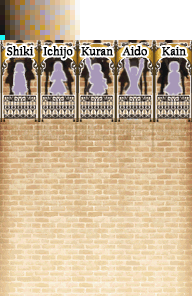
<style>
.page{position:relative;width:192px;height:296px}
.page>*{position:absolute;margin:0}
.t1{font:12px "CalifornianFB-Reg";color:#000000;font-weight:bold}
.t2{font:12px "CalifornianFB-Reg";letter-spacing:-0.005em;color:#000000;font-weight:bold}
</style>
<div class="page">
<p class="t1" style="left:7px;top:46px;width:27px;height:10px">Shiki</p>
<p class="t1" style="left:43px;top:46px;width:30px;height:13px">Ichijo</p>
<p class="t2" style="left:81px;top:47px;width:32px;height:9px">Kuran</p>
<p class="t1" style="left:122px;top:46px;width:25px;height:10px">Aido</p>
<p class="t2" style="left:162px;top:47px;width:25px;height:9px">Kain</p>
</div>
